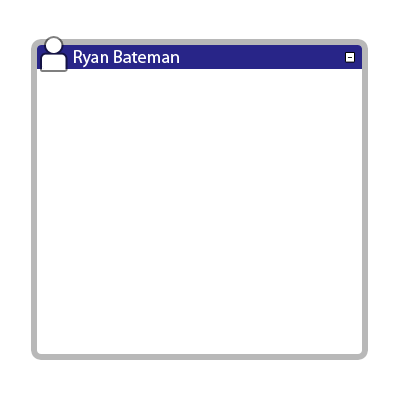
<style>
.page{position:relative;width:400px;height:400px;background:#ffffff}
.page>*{position:absolute;margin:0}
.t1{font:18px "MyriadPro-Regular";color:#ffffff}
.t2{font:10px "MyriadPro-Regular";scale:1.59 1}
</style>
<div class="page">
<p class="t1" style="left:74px;top:50px;width:105px;height:18px">Ryan Bateman</p>
<p class="t2" style="left:347px;top:57px;width:5px;height:1px">-</p>
</div>
